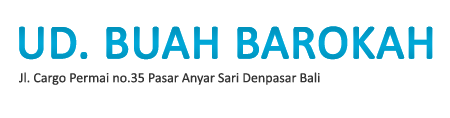
<style>
.page{position:relative;width:450px;height:118px;background:#ffffff}
.page>*{position:absolute;margin:0}
.t1{font:48px "Calibri";color:#009ecb;font-weight:bold}
.t2{font:14px "Calibri";color:#343434}
</style>
<div class="page">
<p class="t1" style="left:19px;top:26px;width:414px;height:34px">UD. BUAH BAROKAH</p>
<p class="t2" style="left:19px;top:72px;width:301px;height:13px">Jl. Cargo Permai no.35 Pasar Anyar Sari Denpasar Bali</p>
</div>
